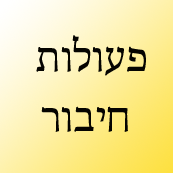
<style>
.page{position:relative;width:173px;height:173px}
.page>*{position:absolute;margin:0}
.t1{font:50px "AdobeHebrew-Regular";color:#050400}
</style>
<div class="page">
<p class="t1" style="left:36px;top:35px;width:110px;height:97px;text-align:center">תולועפ<br>רוביח</p>
</div>
